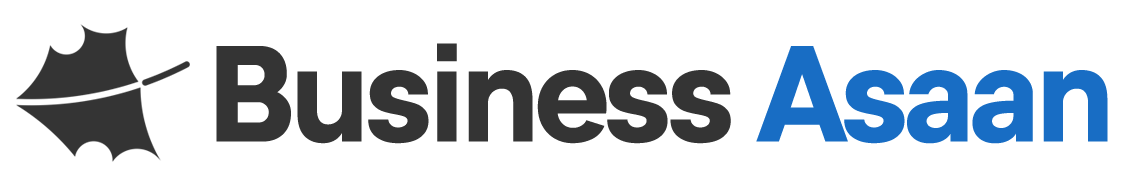
<style>
.page{position:relative;width:1128px;height:184px;background:#ffffff}
.page>*{position:absolute;margin:0}
.t1{font:133.3px "Genera-SemiBold";letter-spacing:-0.05em;color:#343434}
.t2{font:133.3px "Genera-SemiBold";letter-spacing:-0.05em;color:#186dc4}
</style>
<div class="page">
<p class="t1" style="left:216px;top:43px;width:892px;height:101px">Business <span class="t2">Asaan</span></p>
</div>
